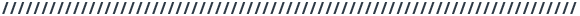
<style>
.page{position:relative;width:580px;height:16px;background:#ffffff}
.page>*{position:absolute;margin:0}
.t1{font:16px "OpenSans-Bold";letter-spacing:0.08em;color:#2d3945}
</style>
<div class="page">
<p class="t1" style="left:2px;top:2px;width:575px;height:12px">/////////////////////////////////////////////////////////////////////////////////////////</p>
</div>
